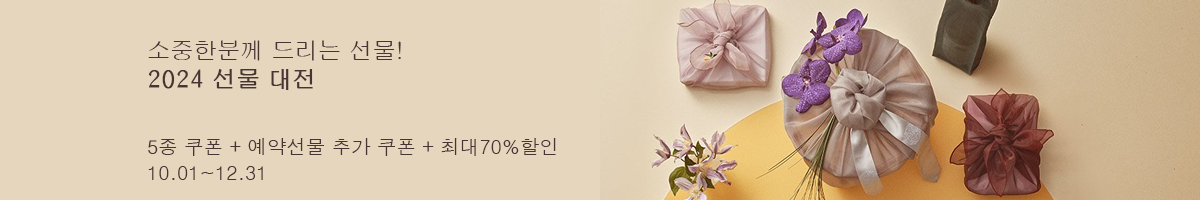
<style>
.page{position:relative;width:1200px;height:200px;background:#e6d6bd}
.page>*{position:absolute;margin:0}
.t1{font:23.3px "H2gprM";color:#473535}
.t2{font:23.3px "H2gprM";color:#473535;font-weight:bold}
.t3{font:19.4px "Dotum";color:#473535}
</style>
<div class="page">
<p class="t1" style="left:148px;top:40px;width:253px;height:50px">소중한분께 드리는 선물!<br><span class="t2">2024 선물 대전</span></p>
<p class="t3" style="left:148px;top:138px;width:408px;height:18px">5종 쿠폰 + 예약선물 추가 쿠폰 + 최대70%할인</p>
<p class="t3" style="left:148px;top:166px;width:115px;height:14px">10.01~12.31</p>
</div>
